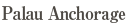
<style>
.page{position:relative;width:126px;height:27px;background:#ffffff}
.page>*{position:absolute;margin:0}
.t1{font:18px "RyuminPro-ExBold";letter-spacing:-0.04em;color:#4c4843;scale:0.9 1}
</style>
<div class="page">
<p class="t1" style="left:2px;top:6px;width:124px;height:17px">Palau Anchorage</p>
</div>
